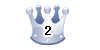
<style>
.page{position:relative;width:100px;height:50px;background:#ffffff}
.page>*{position:absolute;margin:0}
.t1{font:12px "Dotum";color:#000000;font-weight:bold}
</style>
<div class="page">
<p class="t1" style="left:45px;top:26px;width:6px;height:9px">2</p>
</div>
